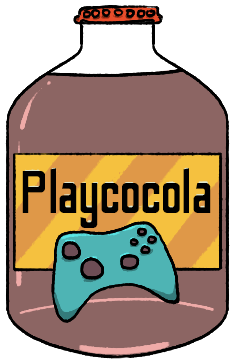
<style>
.page{position:relative;width:234px;height:363px;background:#8c6563}
.page>*{position:absolute;margin:0}
.t1{font:60px "OdibeeSans-Regular";color:#000000}
</style>
<div class="page">
<p class="t1" style="left:22px;top:168px;width:189px;height:60px">Playcocola</p>
</div>
